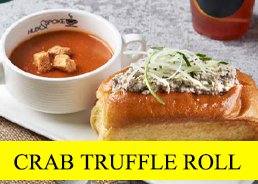
<style>
.page{position:relative;width:258px;height:184px}
.page>*{position:absolute;margin:0}
.t1{font:22.4px "TimesNewRomanPSMT";color:#000000}
</style>
<div class="page">
<p class="t1" style="left:14px;top:154px;width:227px;height:16px">CRAB TRUFFLE ROLL</p>
</div>
